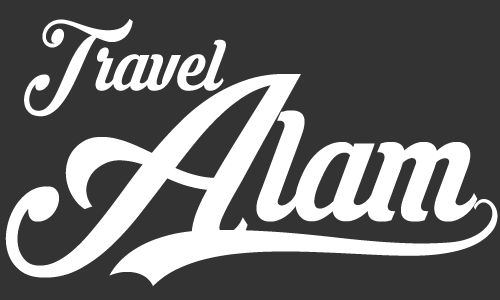
<style>
.page{position:relative;width:500px;height:300px;background:#333333}
.page>*{position:absolute;margin:0}
.t1{font:91.7px "KrinkesDecorPERSONALUSE";color:#ffffff;scale:0.9 1}
.t2{font:200px "KrinkesDecorPERSONALUSE";color:#ffffff;scale:0.9 1}
.t3{font:100px "KrinkesDecorPERSONALUSE";color:#ffffff;scale:0.9 1}
</style>
<div class="page">
<p class="t1" style="left:24px;top:19px;width:202px;height:98px">Travel</p>
<p class="t2" style="left:5px;top:74px;width:493px;height:213px">Alam<span class="t3">0</span></p>
</div>
